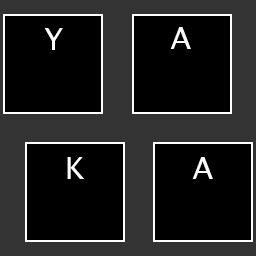
<style>
.page{position:relative;width:256px;height:256px;background:#000000}
.page>*{position:absolute;margin:0}
.t1{font:30px "LucidaSansUnicode";color:#ffffff}
</style>
<div class="page">
<p class="t1" style="left:44px;top:28px;width:19px;height:22px">Y</p>
<p class="t1" style="left:170px;top:27px;width:21px;height:22px">A</p>
<p class="t1" style="left:67px;top:157px;width:17px;height:22px">K</p>
<p class="t1" style="left:192px;top:157px;width:21px;height:22px">A</p>
</div>
